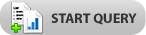
<style>
.page{position:relative;width:146px;height:35px}
.page>*{position:absolute;margin:0}
.t1{font:14px "MyriadPro-Bold";color:#333333;text-transform:uppercase}
</style>
<div class="page">
<p class="t1" style="left:51px;top:13px;width:86px;height:12px">start query</p>
</div>
